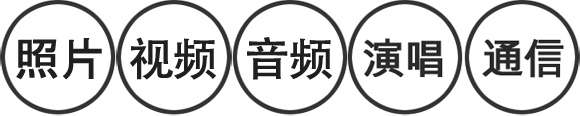
<style>
.page{position:relative;width:580px;height:116px;background:#ffffff}
.page>*{position:absolute;margin:0}
.t1{font:46.1px "MS-Gothic";letter-spacing:-0.05em;color:#1f1f1f;font-weight:bold}
.t2{font:45.2px "AdobeHeitiStd-Regular";letter-spacing:-0.05em;color:#1f1f1f;font-weight:bold}
</style>
<div class="page">
<p class="t1" style="left:16px;top:38px;width:86px;height:42px">照片</p>
<p class="t2" style="left:130px;top:37px;width:86px;height:43px">视频</p>
<p class="t2" style="left:247px;top:37px;width:85px;height:43px">音频</p>
</div>
